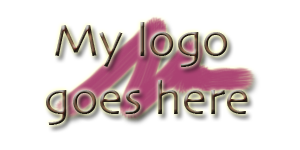
<style>
.page{position:relative;width:300px;height:150px;background:#ffffff}
.page>*{position:absolute;margin:0}
.t1{font:48px "Skia-Regular"}
</style>
<div class="page">
<p class="t1" style="left:46px;top:22px;width:202px;height:103px;text-align:center">My logo <br>goes here</p>
</div>
